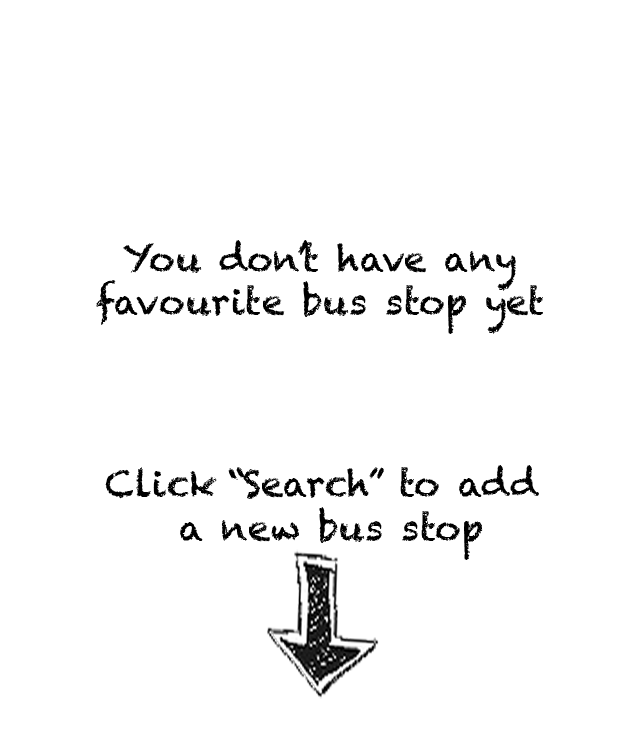
<style>
.page{position:relative;width:640px;height:734px;background:#ffffff}
.page>*{position:absolute;margin:0}
.t1{font:36px "Chalkduster";color:#000000}
</style>
<div class="page">
<p class="t1" style="left:96px;top:240px;width:447px;height:94px;text-align:center">You don’t have any<br>favourite bus stop yet</p>
<p class="t1" style="left:105px;top:465px;width:434px;height:95px;text-align:center">Click “Search” to add<br> a new bus stop</p>
</div>
